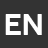
<style>
.page{position:relative;width:48px;height:48px;background:#333333}
.page>*{position:absolute;margin:0}
.t1{font:28px "CocoGothic-Bold";color:#ffffff}
</style>
<div class="page">
<p class="t1" style="left:5px;top:14px;width:37px;height:21px">EN</p>
</div>
